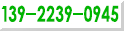
<style>
.page{position:relative;width:124px;height:31px;background:#ffffff}
.page>*{position:absolute;margin:0}
.t1{font:20px "hzgb";color:#00b500;scale:0.82 1}
</style>
<div class="page">
<p class="t1" style="left:1px;top:5px;width:118px;height:17px">139-2239-0945</p>
</div>
